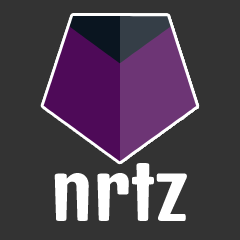
<style>
.page{position:relative;width:240px;height:240px;background:#333333}
.page>*{position:absolute;margin:0}
.t1{font:81px "DenkOne-Regular";color:#ffffff}
</style>
<div class="page">
<p class="t1" style="left:54px;top:162px;width:133px;height:59px">nrtz</p>
</div>
